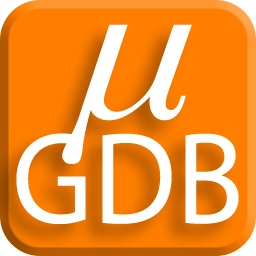
<style>
.page{position:relative;width:256px;height:256px;background:#ff7e00}
.page>*{position:absolute;margin:0}
.t1{font:215.2px "TimesNewRomanPS-ItalicMT";color:#ffffff;scale:1.15 1}
.t2{font:131.4px "MyriadPro-Regular";color:#ffffff;scale:0.95 1}
</style>
<div class="page">
<p class="t1" style="left:62px;top:24px;width:130px;height:140px">μ</p>
<p class="t2" style="left:16px;top:133px;width:223px;height:92px">GDB</p>
</div>
